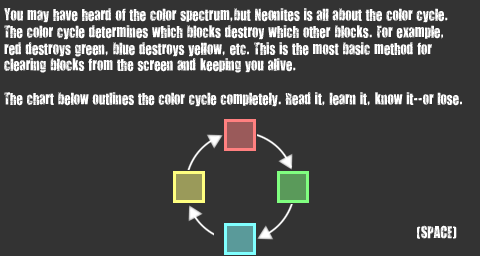
<style>
.page{position:relative;width:480px;height:256px;background:#333333}
.page>*{position:absolute;margin:0}
.t1{font:14px "YouAreLoved";color:#ffffff}
</style>
<div class="page">
<p class="t1" style="left:4px;top:8px;width:458px;height:231px">You may have heard of the color spectrum,but Neonites is all about the color cycle.<br>The color cycle determines which blocks destroy which other blocks. For example,<br>red destroys green, blue destroys yellow, etc. This is the most basic method for<br>clearing blocks from the screen and keeping you alive.<br><br>The chart below outlines the color cycle completely. Read it, learn it, know it--or lose.<br><br><br><br><br><br><br><br>                                                                                                          (SPACE)</p>
</div>
